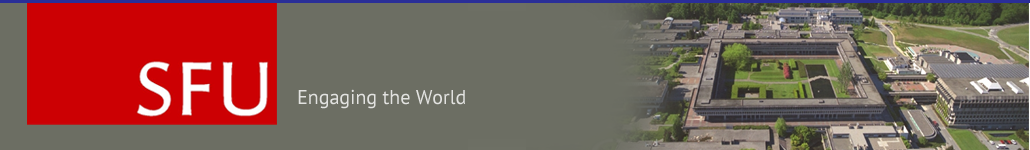
<style>
.page{position:relative;width:1030px;height:150px;background:#6c6e63}
.page>*{position:absolute;margin:0}
.t1{font:20px "PTSans-Regular";color:#e2e2e0}
</style>
<div class="page">
<p class="t1" style="left:298px;top:89px;width:167px;height:20px">Engaging the World</p>
</div>
